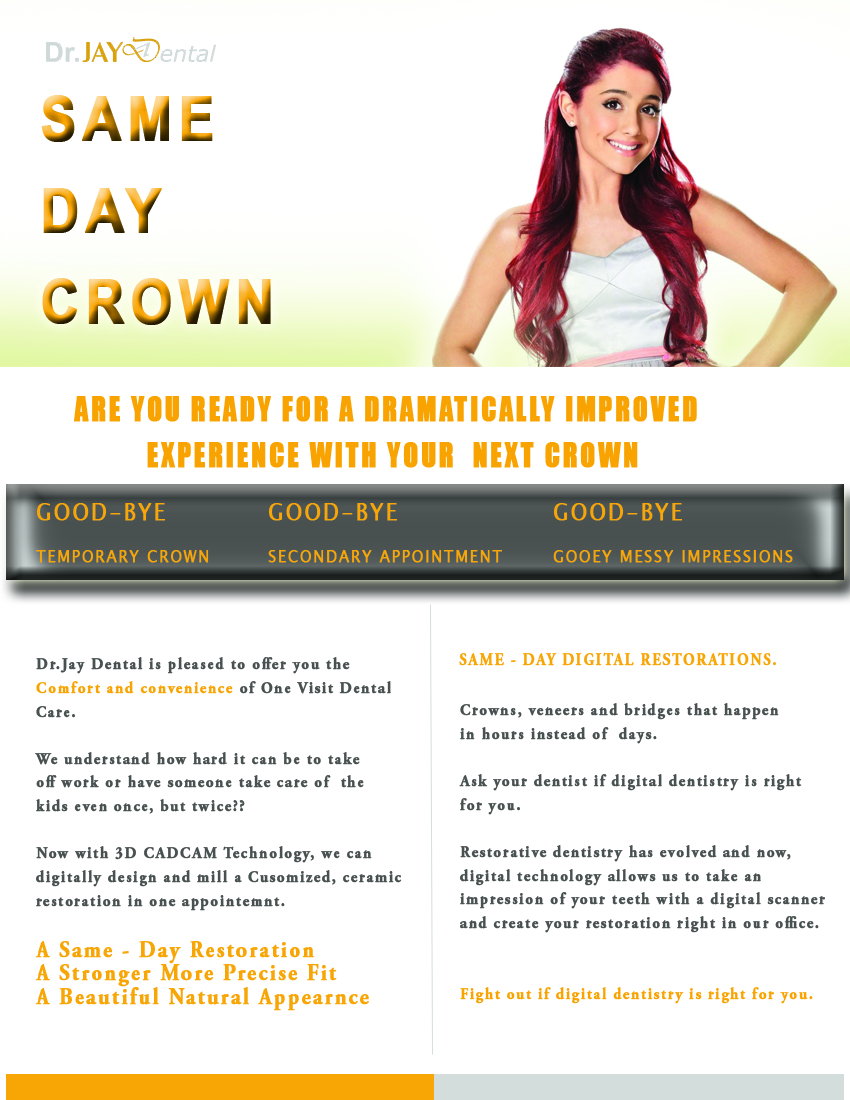
<style>
.page{position:relative;width:850px;height:1100px;background:#ffffff}
.page>*{position:absolute;margin:0}
.t1{font:105px/45.8px "Arial-BoldMT";letter-spacing:0.1em;font-weight:bold;scale:0.87 1}
.t2{font:52.5px/45.8px "Impact";letter-spacing:0.1em;color:#f8a300;font-weight:bold;scale:0.87 1}
.t3{font:29.2px/45.8px "LucidaSansUnicode";letter-spacing:0.1em;color:#f8a506;font-weight:bold;scale:0.87 1}
.t4{font:40.8px/45.8px "LucidaSansUnicode";letter-spacing:0.1em;color:#f8a506;font-weight:bold;scale:0.87 1}
.t5{font:29.2px "AGaramondPro-Bold";letter-spacing:0.1em;color:#f8a506;font-weight:bold;scale:0.87 1}
.t6{font:28.3px/23.6px "AGaramondPro-Bold";letter-spacing:0.1em;color:#485050;font-weight:bold;scale:0.89 1}
.t7{font:28.3px/23.6px "AGaramondPro-Bold";letter-spacing:0.1em;color:#f8a300;font-weight:bold;scale:0.89 1}
.t8{font:39.7px/23.6px "AGaramondPro-Bold";letter-spacing:0.1em;color:#f8a506;font-weight:bold;scale:0.89 1}
</style>
<div class="page">
<p class="t1" style="left:41px;top:95px;width:230px;height:230px;text-align:justify">SAME<br><br>DAY<br><br>CROWN</p>
<p class="t2" style="left:74px;top:396px;width:623px;height:72px;text-align:justify">ARE YOU READY FOR A DRAMATICALLY IMPROVED<br>         EXPERIENCE WITH YOUR  NEXT CROWN</p>
<p class="t3" style="left:36px;top:503px;width:173px;height:60px;text-align:justify"><span class="t4">GOOD-BYE<br></span>TEMPORARY CROWN</p>
<p class="t3" style="left:268px;top:503px;width:235px;height:60px;text-align:justify"><span class="t4">GOOD-BYE<br></span>SECONDARY APPOINTMENT</p>
<p class="t3" style="left:553px;top:503px;width:240px;height:60px;text-align:justify"><span class="t4">GOOD-BYE<br></span>GOOEY MESSY IMPRESSIONS</p>
<p class="t5" style="left:459px;top:652px;width:317px;height:14px">SAME - DAY DIGITAL RESTORATIONS.</p>
<p class="t6" style="left:35px;top:657px;width:367px;height:354px">Dr.Jay Dental is pleased to offer you the<br><span class="t7">Comfort and convenience </span>of One Visit Dental <br>Care. <br><br>We understand how hard it can be to take<br>off work or have someone take care of  the<br>kids even once, but twice??<br><br>Now with 3D CADCAM Technology, we can <br>digitally design and mill a Cusomized, ceramic<br>restoration in one appointemnt.<br><span class="t8"><br>A Same - Day Restoration<br>A Stronger More Precise Fit<br>A Beautiful Natural Appearnce</span></p>
<p class="t6" style="left:459px;top:703px;width:366px;height:301px">Crowns, veneers and bridges that happen<br>in hours instead of  days.<br><br>Ask your dentist if digital dentistry is right <br>for you.<br><br>Restorative dentistry has evolved and now,<br>digital technology allows us to take an<br>impression of your teeth with a digital scanner<br>and create your restoration right in our office.<br><br><br><span class="t7">Fight out if digital dentistry is right for you.</span></p>
</div>
